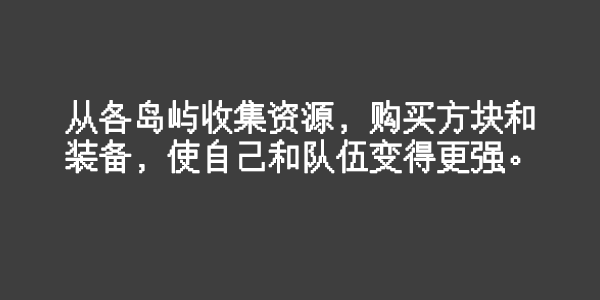
<style>
.page{position:relative;width:600px;height:300px;background:#3e3e3e}
.page>*{position:absolute;margin:0}
.t1{font:32.8px "UnifontMedium";color:#ffffff;font-weight:bold}
</style>
<div class="page">
<p class="t1" style="left:65px;top:100px;width:470px;height:74px">从各岛屿收集资源, 购买方块和<br>装备, 使自己和队伍变得更强。</p>
</div>
